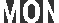
<style>
.page{position:relative;width:59px;height:23px;background:#ffffff}
.page>*{position:absolute;margin:0}
.t1{font:31.9px "RobotoCondensed-Bold";color:#ffffff}
</style>
<div class="page">
<p class="t1" style="left:0px;top:0px;width:59px;height:23px">MON</p>
</div>
